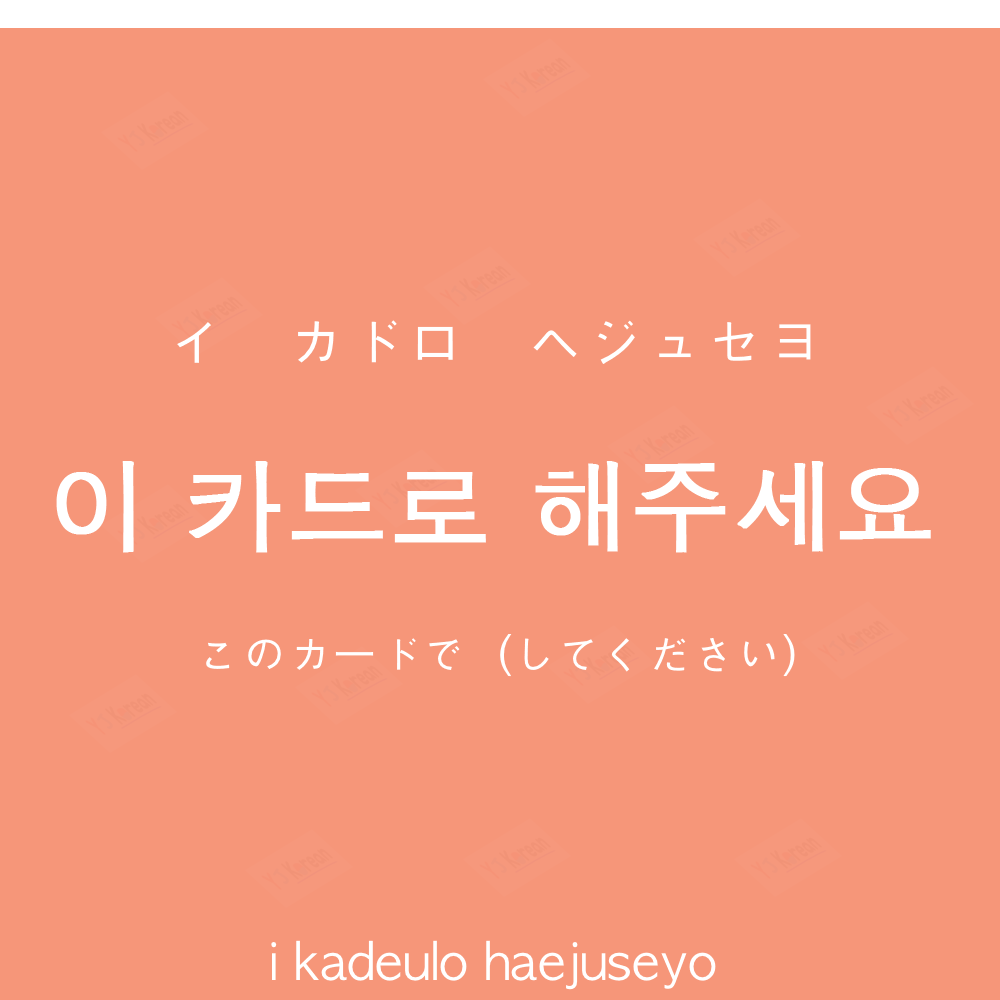
<style>
.page{position:relative;width:1000px;height:1000px;background:#f69679}
.page>*{position:absolute;margin:0}
.t1{font:60px "AppleGothic";color:#ffffff}
.t2{font:100px "AppleGothic";color:#ffffff;font-weight:bold}
.t3{font:45px "AppleGothic";color:#ffffff}
.t4{font:45px "HiraKakuProN-W3";color:#ffffff}
.t5{font:50px "AppleGothic";color:#ffffff}
</style>
<div class="page">
<p class="t1" style="left:177px;top:320px;width:634px;height:44px">イ　カドロ　ヘジュセヨ</p>
<p class="t2" style="left:56px;top:461px;width:875px;height:92px">이 카드로 해주세요</p>
<p class="t3" style="left:206px;top:634px;width:589px;height:43px">このカ<span class="t4">ー</span>ドで（してください）</p>
<p class="t5" style="left:271px;top:940px;width:445px;height:50px">i kadeulo haejuseyo</p>
</div>
